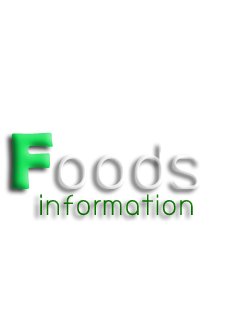
<style>
.page{position:relative;width:229px;height:312px;background:#ffffff}
.page>*{position:absolute;margin:0}
.t1{font:61.5px "BangnaNew"}
.t2{font:80px "BerlinSansFBDemi-Bold"}
.t3{font:27.5px "BangnaNew";color:#0b7600}
</style>
<div class="page">
<p class="t1" style="left:11px;top:132px;width:190px;height:57px"><span class="t2">F</span>oods</p>
<p class="t3" style="left:40px;top:194px;width:153px;height:22px">information</p>
</div>
